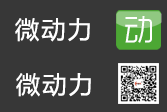
<style>
.page{position:relative;width:167px;height:112px;background:#373737}
.page>*{position:absolute;margin:0}
.t1{font:29.2px "RTWSYueGoDemo-Regular";color:#ffffff}
.t2{font:24px "MicrosoftYaHei";letter-spacing:0.1em;color:#ffffff}
</style>
<div class="page">
<p class="t1" style="left:125px;top:16px;width:27px;height:27px">动</p>
<p class="t2" style="left:15px;top:18px;width:75px;height:24px">微动力</p>
<p class="t2" style="left:16px;top:73px;width:75px;height:24px">微动力</p>
</div>
